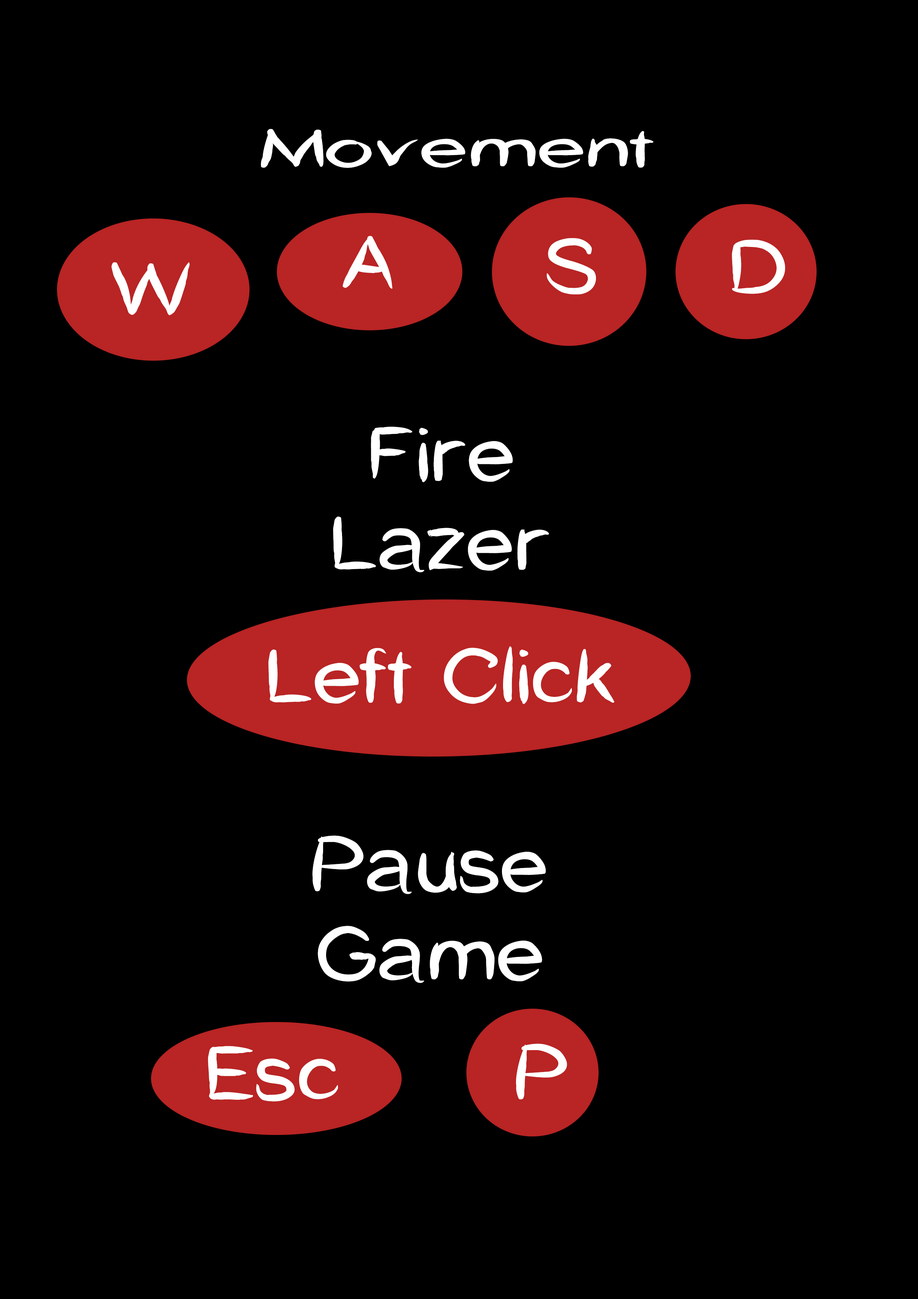
<style>
.page{position:relative;width:918px;height:1299px;background:#000000}
.page>*{position:absolute;margin:0}
.t1{font:52.5px "CatCafe";color:#ffffff;scale:1.69 1}
.t2{font:74px "CatCafe";color:#ffffff;scale:1.2 1}
</style>
<div class="page">
<p class="t1" style="left:261px;top:129px;width:393px;height:39px">Movement</p>
<p class="t2" style="left:342px;top:236px;width:50px;height:53px">A</p>
<p class="t2" style="left:547px;top:238px;width:49px;height:56px">S</p>
<p class="t2" style="left:732px;top:240px;width:53px;height:54px">D</p>
<p class="t2" style="left:111px;top:262px;width:79px;height:53px">W</p>
<p class="t2" style="left:333px;top:426px;width:216px;height:146px;text-align:center">Fire Lazer</p>
<p class="t2" style="left:268px;top:646px;width:347px;height:58px">Left Click</p>
<p class="t2" style="left:312px;top:835px;width:234px;height:148px;text-align:center">Pause Game</p>
<p class="t2" style="left:208px;top:1046px;width:130px;height:55px">Esc</p>
<p class="t2" style="left:516px;top:1043px;width:51px;height:56px">P</p>
</div>
